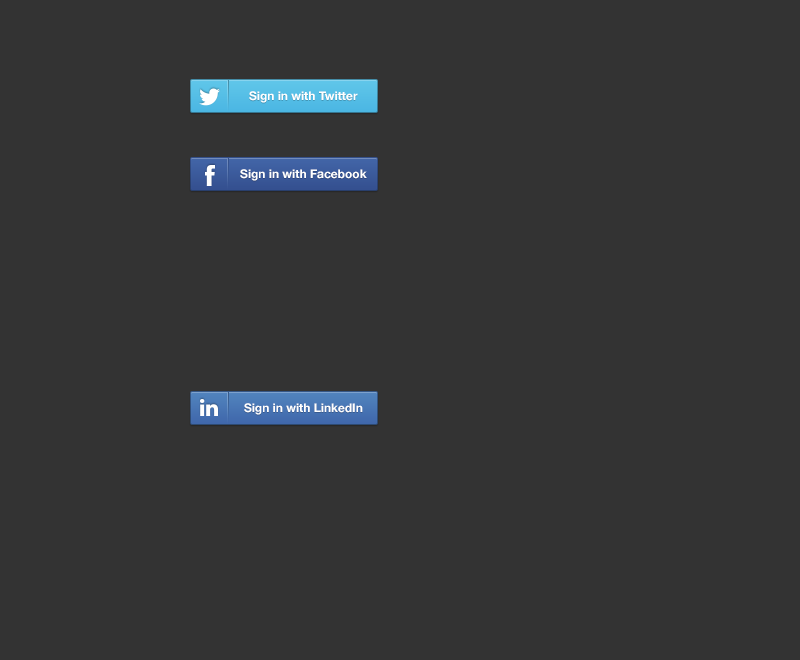
<style>
.page{position:relative;width:800px;height:660px;background:#333333}
.page>*{position:absolute;margin:0}
.t1{font:12px "HelveticaNeue-Bold";color:#ffffff}
</style>
<div class="page">
<p class="t1" style="left:249px;top:91px;width:109px;height:12px">Sign in with Twitter</p>
<p class="t1" style="left:240px;top:169px;width:127px;height:12px">Sign in with Facebook</p>
<p class="t1" style="left:244px;top:403px;width:119px;height:12px">Sign in with LinkedIn</p>
</div>
